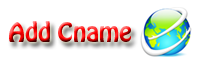
<style>
.page{position:relative;width:200px;height:65px;background:#ffffff}
.page>*{position:absolute;margin:0}
.t1{font:24px "HoboStd"}
</style>
<div class="page">
<p class="t1" style="left:9px;top:21px;width:122px;height:21px">Add Cname</p>
</div>
